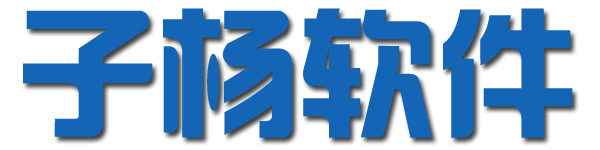
<style>
.page{position:relative;width:600px;height:150px;background:#1565b6}
.page>*{position:absolute;margin:0}
.t1{font:140px "hzgb";color:#1565b6}
</style>
<div class="page">
<p class="t1" style="left:23px;top:8px;width:550px;height:130px">子杨软件</p>
</div>
